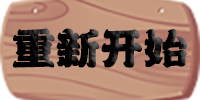
<style>
.page{position:relative;width:200px;height:100px}
.page>*{position:absolute;margin:0}
.t1{font:50px "-";letter-spacing:-0.02em;color:#000000;font-weight:bold}
</style>
<div class="page">
<p class="t1" style="left:12px;top:28px;width:175px;height:40px">重新开始</p>
</div>
